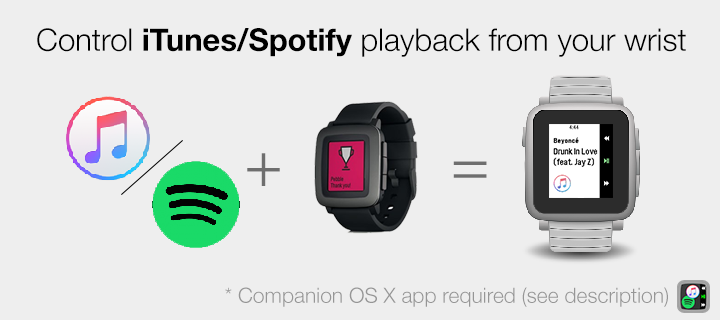
<style>
.page{position:relative;width:720px;height:320px;background:#eeeeee}
.page>*{position:absolute;margin:0}
.t1{font:31px "HelveticaNeue-Light";color:#000000}
.t2{font:31px "HelveticaNeue-Bold";color:#000000}
.t3{font:65px "HelveticaNeue-Light";color:#6e6e6e}
.t4{font:21px "HelveticaNeue-Light";color:#969696}
</style>
<div class="page">
<p class="t1" style="left:37px;top:28px;width:649px;height:29px">Control <span class="t2">iTunes/Spotify </span>playback from your wrist</p>
<p class="t3" style="left:247px;top:153px;width:33px;height:33px">+</p>
<p class="t3" style="left:453px;top:161px;width:34px;height:17px">=</p>
<p class="t4" style="left:225px;top:287px;width:443px;height:20px">* Companion OS X app required (see description)</p>
</div>
